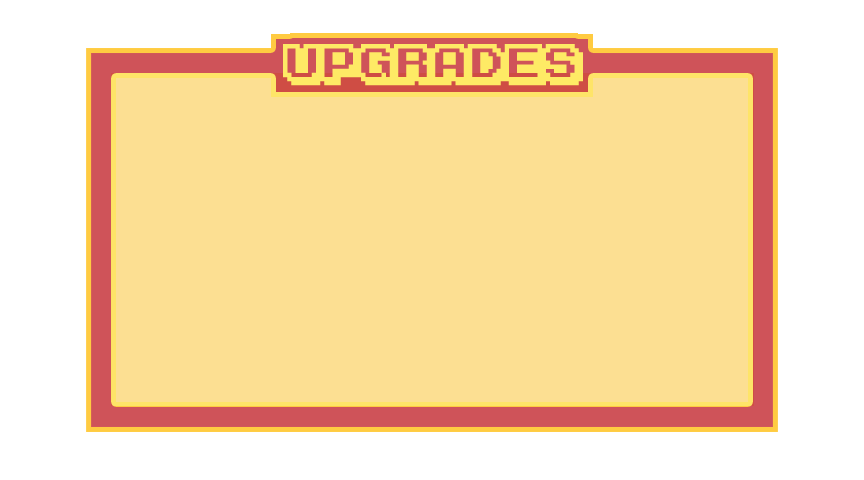
<style>
.page{position:relative;width:864px;height:480px;background:#fcdf92}
.page>*{position:absolute;margin:0}
.t1{font:42px "KarmaticArcade";color:#feea65}
</style>
<div class="page">
<p class="t1" style="left:283px;top:44px;width:300px;height:42px">UPGRADEs</p>
</div>
